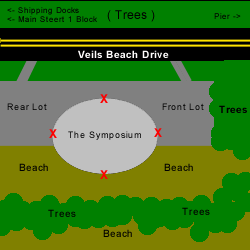
<style>
.page{position:relative;width:250px;height:250px;background:#008000}
.page>*{position:absolute;margin:0}
.t1{font:8px "ArialMT";color:#000000}
.t2{font:12px "ArialMT";color:#000000}
.t3{font:10px "Arial-BoldMT";color:#fffdfd}
.t4{font:12px "Arial-BoldMT";color:#fe0000}
.t5{font:9px "ArialMT";color:#000000}
.t6{font:10px "Arial-BoldMT";color:#000000}
.t7{font:9px "ArialMT"}
.t8{font:10px "ArialMT";color:#000000}
</style>
<div class="page">
<p class="t1" style="left:7px;top:7px;width:90px;height:15px">&lt;- Shipping Docks<br>&lt;- Main Steert 1 Block</p>
<p class="t2" style="left:107px;top:10px;width:48px;height:12px">( Trees )</p>
<p class="t1" style="left:214px;top:13px;width:27px;height:6px">Pier -&gt;</p>
<p class="t3" style="left:78px;top:50px;width:91px;height:8px">Veils Beach Drive</p>
<p class="t4" style="left:100px;top:94px;width:8px;height:9px">X</p>
<p class="t5" style="left:7px;top:103px;width:40px;height:7px">Rear Lot</p>
<p class="t5" style="left:162px;top:103px;width:42px;height:7px">Front Lot</p>
<p class="t6" style="left:219px;top:105px;width:28px;height:8px">Trees</p>
<p class="t4" style="left:49px;top:129px;width:8px;height:9px">X</p>
<p class="t7" style="left:68px;top:131px;width:73px;height:9px">The Symposium</p>
<p class="t4" style="left:154px;top:128px;width:8px;height:9px">X</p>
<p class="t8" style="left:19px;top:163px;width:29px;height:8px">Beach</p>
<p class="t4" style="left:100px;top:170px;width:8px;height:9px">X</p>
<p class="t8" style="left:164px;top:163px;width:29px;height:8px">Beach</p>
<p class="t8" style="left:48px;top:209px;width:28px;height:8px">Trees</p>
<p class="t8" style="left:182px;top:207px;width:28px;height:8px">Trees</p>
<p class="t8" style="left:103px;top:229px;width:29px;height:8px">Beach</p>
</div>
